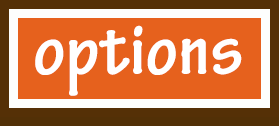
<style>
.page{position:relative;width:279px;height:126px;background:#e6611d}
.page>*{position:absolute;margin:0}
.t1{font:76px "TektonPro-BoldCond";color:#ffffff;scale:1.1 1}
</style>
<div class="page">
<p class="t1" style="left:35px;top:25px;width:207px;height:71px">options</p>
</div>
